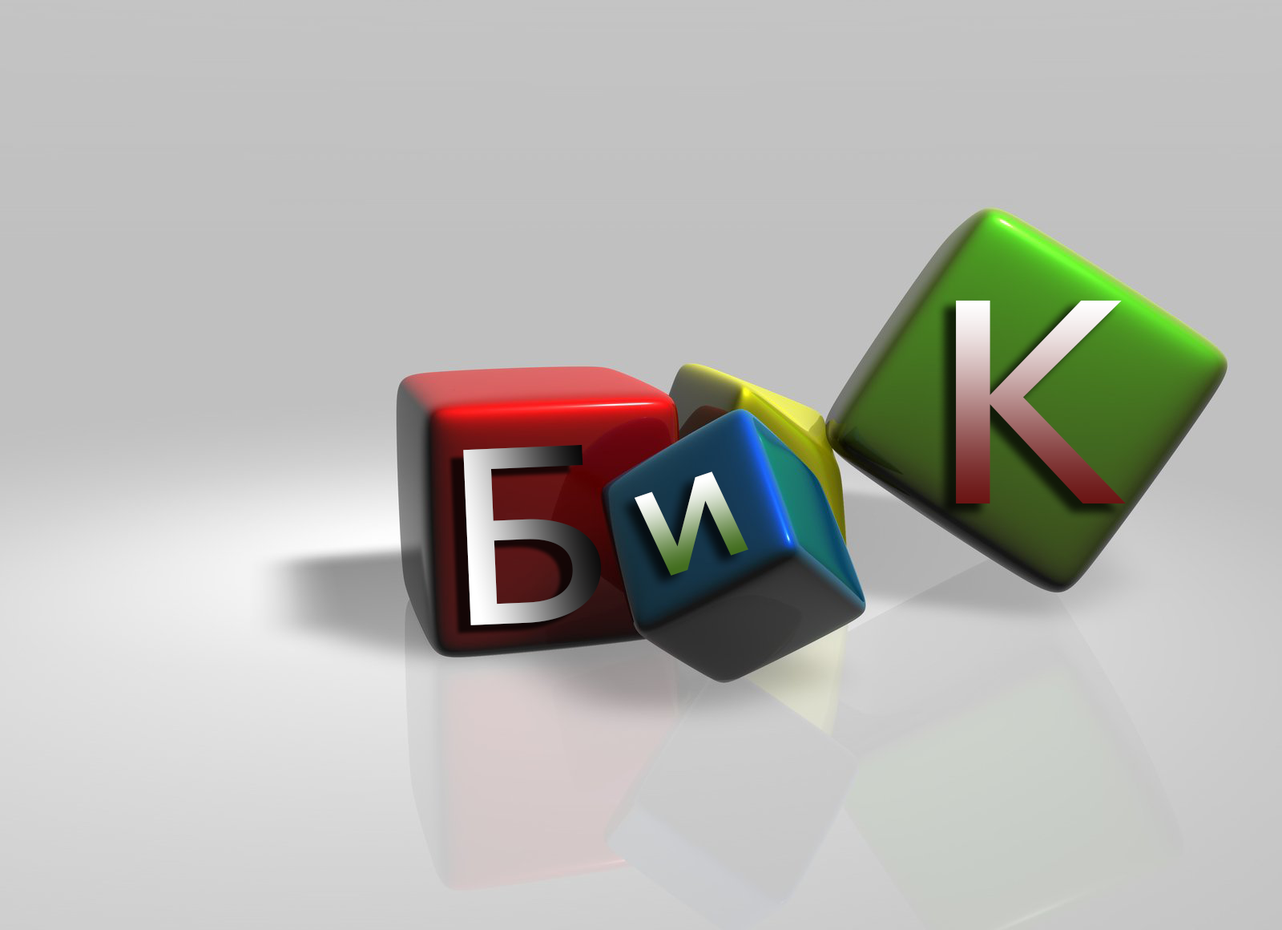
<style>
.page{position:relative;width:1282px;height:930px}
.page>*{position:absolute;margin:0}
.t1{font:317.4px "Consolas";scale:1.23 1}
.t2{font:274.5px "Consolas";scale:1.13 1}
.t3{font:174.9px "Consolas";scale:1.23 1}
</style>
<div class="page">
<p class="t1" style="left:956px;top:300px;width:170px;height:203px">К</p>
<p class="t2" style="left:463px;top:444px;width:139px;height:181px;rotate:-2deg">Б</p>
<p class="t3" style="left:635px;top:471px;width:114px;height:105px;rotate:-19deg">и</p>
</div>
